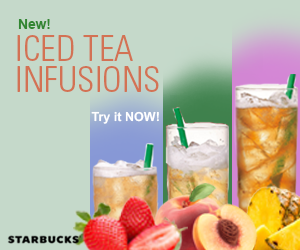
<style>
.page{position:relative;width:300px;height:250px;background:#c5d9ca}
.page>*{position:absolute;margin:0}
.t1{font:13.7px "Arial-BoldMT";color:#328632}
.t2{font:35px/31px "UniversLTStd-LightCn";color:#d37254}
.t3{font:12.6px "Arial-BoldMT";color:#ffffff}
</style>
<div class="page">
<p class="t1" style="left:18px;top:19px;width:32px;height:10px">New!</p>
<p class="t2" style="left:17px;top:35px;width:142px;height:57px">ICED TEA<br>INFUSIONS</p>
<p class="t3" style="left:91px;top:111px;width:68px;height:13px">Try it NOW!</p>
</div>
